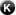
<style>
.page{position:relative;width:16px;height:15px}
.page>*{position:absolute;margin:0}
.t1{font:10px "ArialMT";color:#ffffff;font-weight:bold}
</style>
<div class="page">
<p class="t1" style="left:4px;top:4px;width:7px;height:8px">K</p>
</div>
